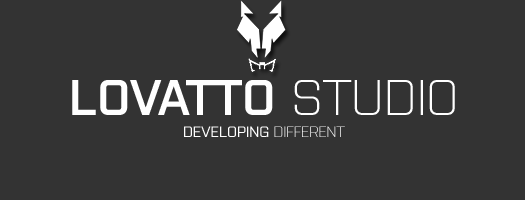
<style>
.page{position:relative;width:525px;height:200px;background:#333333}
.page>*{position:absolute;margin:0}
.t1{font:50px "Purista-SemiBold";color:#ffffff}
.t2{font:50px "Purista-Light";color:#ffffff}
.t3{font:15px "Purista-Medium";color:#ffffff}
.t4{font:15px "Purista-Light";color:#ffffff}
</style>
<div class="page">
<p class="t1" style="left:72px;top:80px;width:383px;height:35px">LOVATTO <span class="t2">STUDIO</span></p>
<p class="t3" style="left:184px;top:126px;width:161px;height:11px">DEVELOPING<span class="t4"> DIFFERENT</span></p>
</div>
